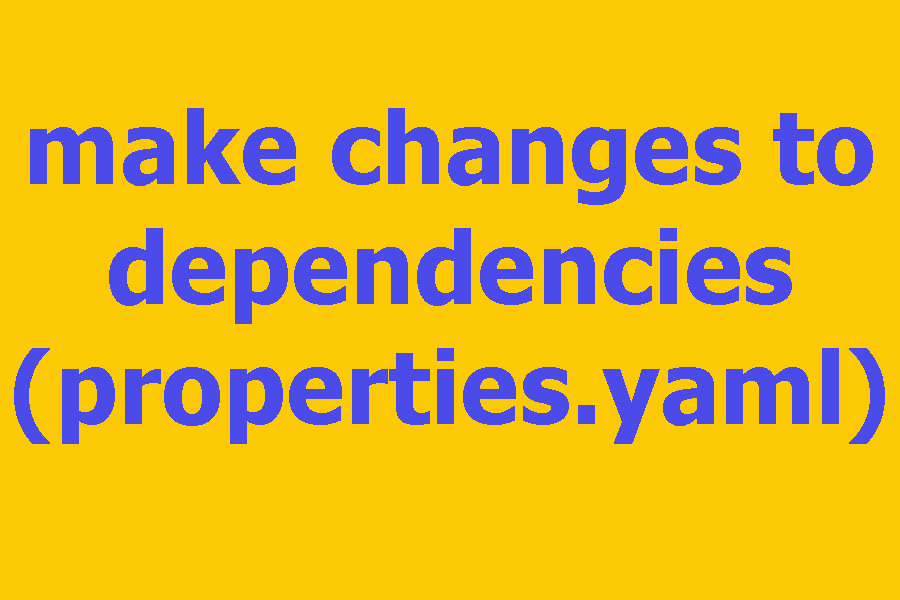
<style>
.page{position:relative;width:900px;height:600px;background:#fbc906}
.page>*{position:absolute;margin:0}
.t1{font:100px "Tahoma-Bold";color:#4b4be9}
</style>
<div class="page">
<p class="t1" style="left:14px;top:108px;width:871px;height:336px;text-align:center">make changes to dependencies (properties.yaml)</p>
</div>
